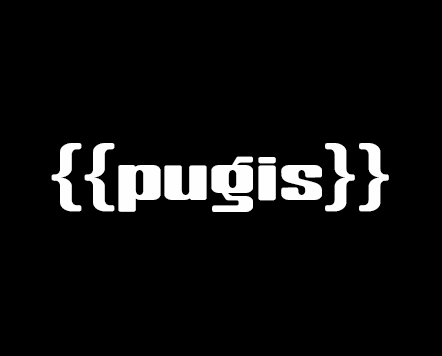
<style>
.page{position:relative;width:442px;height:356px;background:#000000}
.page>*{position:absolute;margin:0}
.t1{font:72px "SneakersPro-Medium";color:#fefefe}
</style>
<div class="page">
<p class="t1" style="left:51px;top:143px;width:338px;height:69px">{{pugis}}</p>
</div>
